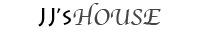
<style>
.page{position:relative;width:200px;height:30px;background:#ffffff}
.page>*{position:absolute;margin:0}
.t1{font:24px "Apple-Chancery";color:#434343}
.t2{font:24px "LithosPro-Regular";color:#000000}
</style>
<div class="page">
<p class="t1" style="left:38px;top:3px;width:123px;height:24px"><span class="t2">JJ’s</span>HOUSE</p>
</div>
